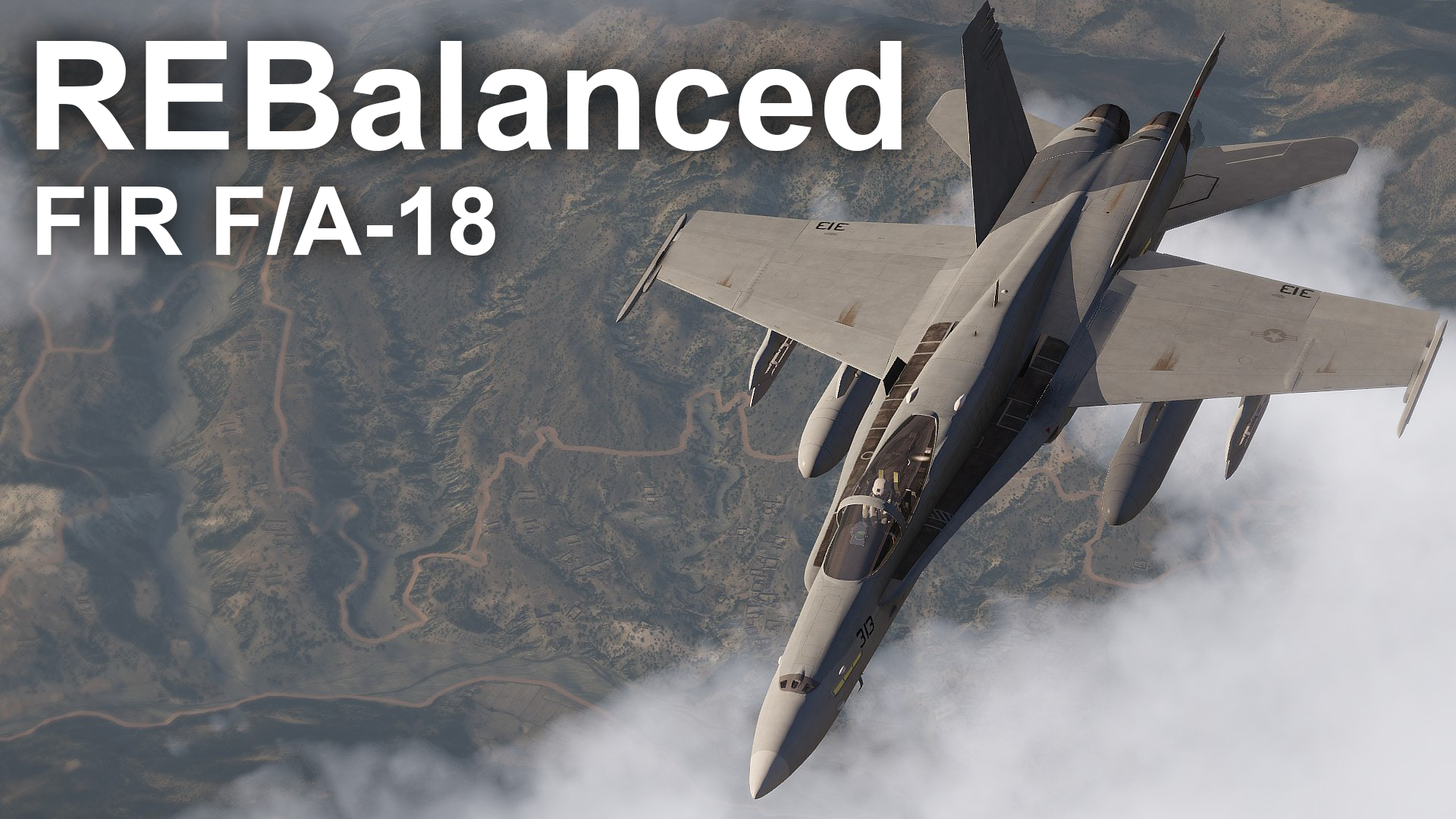
<style>
.page{position:relative;width:1456px;height:819px}
.page>*{position:absolute;margin:0}
.t1{font:151.7px "Arial-BoldMT";color:#ffffff}
.t2{font:94.8px "Arial-BoldMT";color:#ffffff}
</style>
<div class="page">
<p class="t1" style="left:36px;top:41px;width:866px;height:110px">REBalanced</p>
<p class="t2" style="left:37px;top:187px;width:458px;height:69px">FIR F/A-18</p>
</div>
